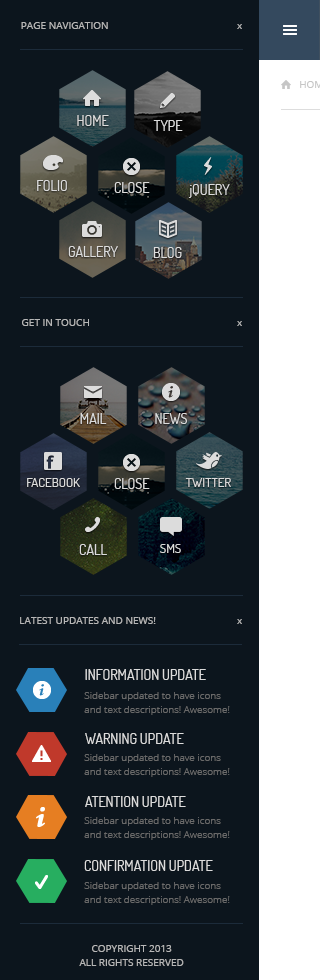
<style>
.page{position:relative;width:320px;height:980px;background:#0c151d}
.page>*{position:absolute;margin:0}
.t1{font:10px "OpenSans";color:#b7b7b7}
.t2{font:10px "OpenSans";color:#b8b8b8}
.t3{font:14px "Dosis-Book";color:#dcdcdc}
.t4{font:13px "Dosis-Book";color:#dcdcdc}
.t5{font:10px/14px "OpenSans-Light";color:#696969}
.t6{font:10px/14px "OpenSans";color:#b7b7b7}
</style>
<div class="page">
<p class="t1" style="left:21px;top:22px;width:87px;height:7px">PAGE NAVIGATION</p>
<p class="t2" style="left:237px;top:24px;width:5px;height:5px">x</p>
<p class="t3" style="left:77px;top:115px;width:32px;height:11px">HOME</p>
<p class="t3" style="left:153px;top:120px;width:30px;height:11px">TYPE</p>
<p class="t3" style="left:37px;top:180px;width:30px;height:11px">FOLIO</p>
<p class="t3" style="left:114px;top:182px;width:36px;height:11px">CLOSE</p>
<p class="t3" style="left:188px;top:184px;width:42px;height:14px">jQUERY</p>
<p class="t3" style="left:68px;top:246px;width:50px;height:11px">GALLERY</p>
<p class="t3" style="left:153px;top:247px;width:29px;height:11px">BLOG</p>
<p class="t1" style="left:22px;top:319px;width:67px;height:7px">GET IN TOUCH</p>
<p class="t1" style="left:237px;top:321px;width:5px;height:5px">x</p>
<p class="t3" style="left:80px;top:413px;width:27px;height:11px">MAIL</p>
<p class="t3" style="left:155px;top:413px;width:32px;height:11px">NEWS</p>
<p class="t4" style="left:27px;top:478px;width:53px;height:9px">FACEBOOK</p>
<p class="t3" style="left:114px;top:478px;width:36px;height:11px">CLOSE</p>
<p class="t4" style="left:185px;top:478px;width:46px;height:9px">TWITTER</p>
<p class="t3" style="left:79px;top:544px;width:28px;height:11px">CALL</p>
<p class="t4" style="left:160px;top:544px;width:21px;height:9px">SMS</p>
<p class="t1" style="left:20px;top:617px;width:136px;height:7px">LATEST UPDATES AND NEWS!</p>
<p class="t1" style="left:237px;top:619px;width:5px;height:5px">x</p>
<p class="t3" style="left:85px;top:669px;width:121px;height:11px">INFORMATION UPDATE</p>
<p class="t5" style="left:84px;top:692px;width:146px;height:23px">Sidebar updated to have icons and text descriptions! Awesome!</p>
<p class="t3" style="left:85px;top:733px;width:99px;height:11px">WARNING UPDATE</p>
<p class="t5" style="left:84px;top:754px;width:146px;height:23px">Sidebar updated to have icons and text descriptions! Awesome!</p>
<p class="t3" style="left:85px;top:796px;width:101px;height:11px">ATENTION UPDATE</p>
<p class="t5" style="left:84px;top:817px;width:146px;height:23px">Sidebar updated to have icons and text descriptions! Awesome!</p>
<p class="t3" style="left:84px;top:860px;width:129px;height:11px">CONFIRMATION UPDATE</p>
<p class="t5" style="left:84px;top:882px;width:146px;height:23px">Sidebar updated to have icons and text descriptions! Awesome!</p>
<p class="t6" style="left:79px;top:945px;width:105px;height:21px;text-align:center">COPYRIGHT 2013<br>ALL RIGHTS RESERVED</p>
</div>
